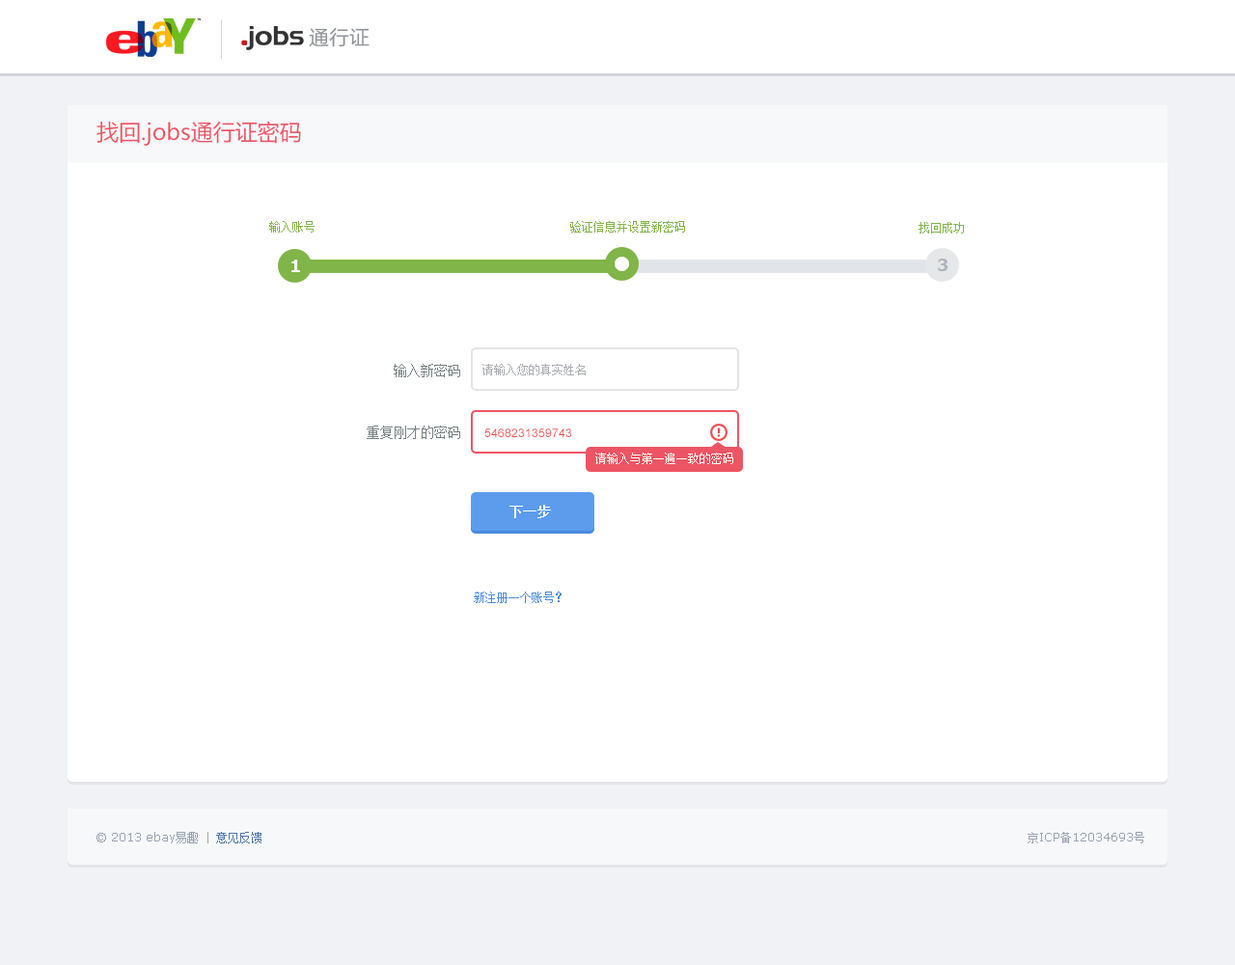
<style>
.page{position:relative;width:1235px;height:965px;background:#ffffff}
.page>*{position:absolute;margin:0}
.t1{font:20.3px "FZLTHJW--GB1-0";color:#8f9399}
.t2{font:22.2px "MicrosoftYaHei";color:#ed5565}
.t3{font:11.6px "SimSun";color:#81b449}
.t4{font:17.3px "Tahoma-Bold";color:#ffffff}
.t5{font:17.3px "Tahoma-Bold";color:#afb4bc}
.t6{font:13.5px "SimSun";color:#768082}
.t7{font:11.6px "SimSun";color:#abadb3}
.t8{font:11.6px "ArialMT";color:#ed5153}
.t9{font:11.6px "SimSun";color:#ffffff}
.t10{font:13.5px "SimSun";color:#ffffff;text-transform:uppercase;font-weight:bold}
.t11{font:11.6px "SimSun";color:#4b89dc}
.t12{font:11.6px "Verdana";color:#99a3b1}
.t13{font:11.6px "SimSun";color:#99a3b1}
.t14{font:11.6px "SimSun";color:#5076a8}
</style>
<div class="page">
<p class="t1" style="left:309px;top:28px;width:61px;height:19px">通行证</p>
<p class="t2" style="left:97px;top:121px;width:204px;height:25px">找回.jobs通行证密码</p>
<p class="t3" style="left:269px;top:221px;width:46px;height:12px">输入账号</p>
<p class="t3" style="left:570px;top:221px;width:115px;height:12px">验证信息并设置新密码</p>
<p class="t3" style="left:919px;top:222px;width:45px;height:12px">找回成功</p>
<p class="t4" style="left:291px;top:260px;width:9px;height:12px">1</p>
<p class="t5" style="left:938px;top:259px;width:11px;height:12px">3</p>
<p class="t6" style="left:394px;top:364px;width:66px;height:13px">输入新密码</p>
<p class="t7" style="left:483px;top:364px;width:103px;height:11px">请输入您的真实姓名</p>
<p class="t6" style="left:367px;top:426px;width:93px;height:13px">重复刚才的密码</p>
<p class="t8" style="left:485px;top:429px;width:87px;height:8px">5468231359743</p>
<p class="t9" style="left:596px;top:453px;width:138px;height:11px">请输入与第一遍一致的密码</p>
<p class="t10" style="left:510px;top:505px;width:41px;height:13px">下一步</p>
<p class="t11" style="left:474px;top:592px;width:88px;height:11px">新注册一个账号？</p>
<p class="t12" style="left:97px;top:832px;width:165px;height:12px">© 2013 ebay<span class="t13">易趣</span><span class="t13"> | </span><span class="t14">意见反馈</span></p>
<p class="t12" style="left:1028px;top:832px;width:117px;height:12px"><span class="t13">京</span>ICP<span class="t13">备</span>12034693<span class="t13">号</span></p>
</div>
